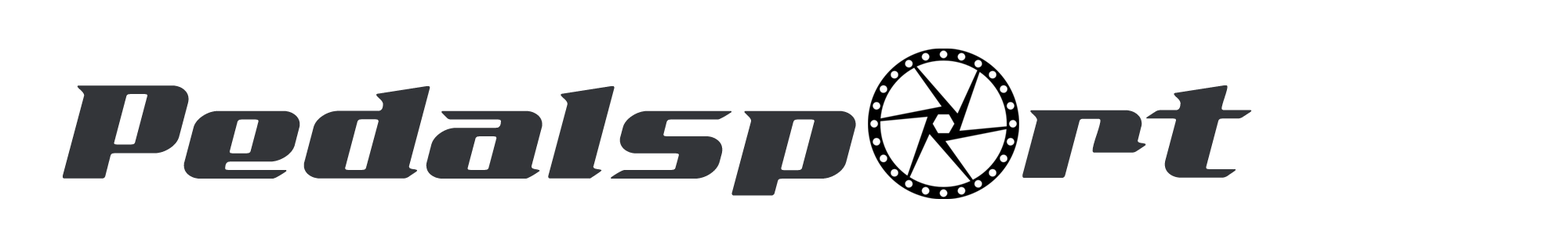
<style>
.page{position:relative;width:1568px;height:235px;background:#ffffff}
.page>*{position:absolute;margin:0}
.t1{font:190.1px "AddCityboyNormal";color:#333539}
</style>
<div class="page">
<p class="t1" style="left:63px;top:85px;width:793px;height:111px">Pedalsp</p>
<p class="t1" style="left:1022px;top:85px;width:230px;height:93px">rt</p>
</div>
